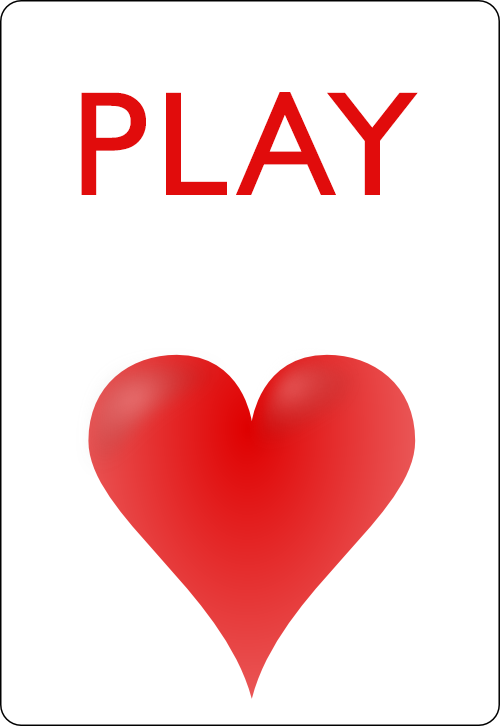
<style>
.page{position:relative;width:500px;height:726px;background:#ffffff}
.page>*{position:absolute;margin:0}
.t1{font:150px "GillSansMT";letter-spacing:0.05em;color:#e10c0c}
</style>
<div class="page">
<p class="t1" style="left:81px;top:92px;width:337px;height:103px">PLAY</p>
</div>
